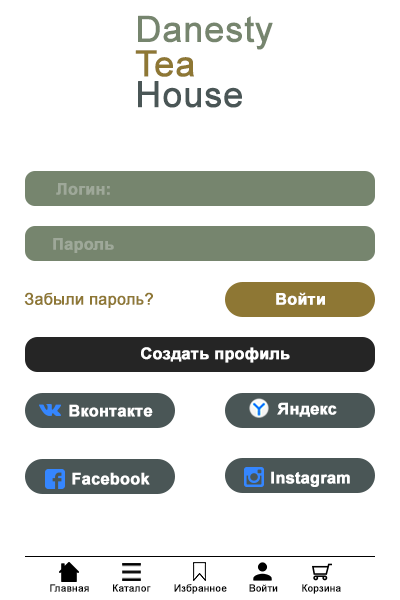
<style>
.page{position:relative;width:400px;height:600px;background:#ffffff}
.page>*{position:absolute;margin:0}
.t1{font:36px/3.8px "ArialMT";color:#76856e;font-weight:bold}
.t2{font:36px/3.8px "ArialMT";color:#8e7734;font-weight:bold}
.t3{font:36px/3.8px "ArialMT";color:#4a5656;font-weight:bold}
.t4{font:16px "Arial-BoldMT";color:#9ea899;font-weight:bold}
.t5{font:16px "ArialMT";color:#8e7734;font-weight:bold}
.t6{font:16px "Arial-BoldMT";color:#ffffff;font-weight:bold}
.t7{font:10px "ArialMT";color:#000000;font-weight:bold}
</style>
<div class="page">
<p class="t1" style="left:135px;top:15px;width:138px;height:93px">Danesty<br><br><br><br><br><br> <br><br><br><span class="t2">Tea <br><br><br><br><br><br><br><br></span><span class="t3">House</span></p>
<p class="t4" style="left:56px;top:183px;width:54px;height:12px">Логин:</p>
<p class="t4" style="left:53px;top:238px;width:61px;height:15px">Пароль</p>
<p class="t5" style="left:24px;top:292px;width:129px;height:16px">Забыли пароль?</p>
<p class="t6" style="left:276px;top:292px;width:49px;height:13px">Войти</p>
<p class="t6" style="left:141px;top:347px;width:149px;height:16px">Создать профиль</p>
<p class="t6" style="left:69px;top:404px;width:84px;height:13px">Вконтакте</p>
<p class="t6" style="left:277px;top:402px;width:60px;height:15px">Яндекс</p>
<p class="t6" style="left:72px;top:472px;width:78px;height:13px">Facebook</p>
<p class="t6" style="left:271px;top:471px;width:79px;height:16px">Instagram</p>
<p class="t7" style="left:50px;top:584px;width:39px;height:8px">Главная</p>
<p class="t7" style="left:113px;top:584px;width:38px;height:8px">Каталог</p>
<p class="t7" style="left:174px;top:584px;width:53px;height:10px">Избранное</p>
<p class="t7" style="left:249px;top:584px;width:29px;height:8px">Войти</p>
<p class="t7" style="left:302px;top:584px;width:39px;height:10px">Корзина</p>
</div>
